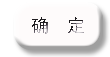
<style>
.page{position:relative;width:110px;height:57px;background:#fefbfb}
.page>*{position:absolute;margin:0}
.t1{font:18px "SimHei"}
</style>
<div class="page">
<p class="t1" style="left:32px;top:17px;width:52px;height:17px">确  定</p>
</div>
